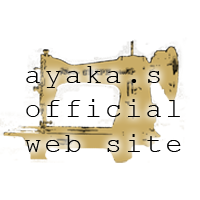
<style>
.page{position:relative;width:200px;height:200px;background:#ffffff}
.page>*{position:absolute;margin:0}
.t1{font:28.4px "CourierNewPSMT";letter-spacing:0.11em;color:#010101}
</style>
<div class="page">
<p class="t1" style="left:25px;top:66px;width:156px;height:86px">ayaka.s<br>official<br>web site</p>
</div>
